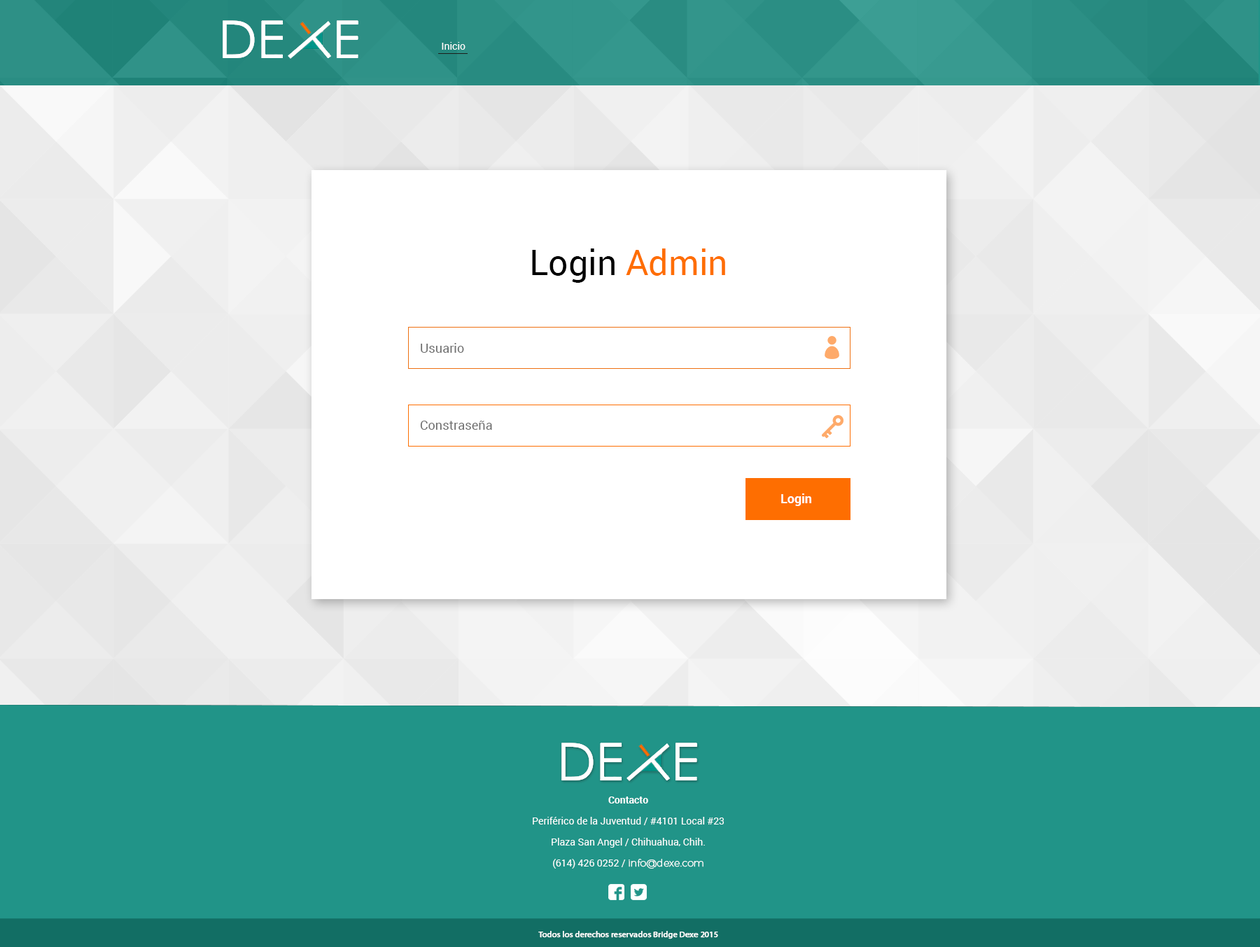
<style>
.page{position:relative;width:1260px;height:947px;background:#ffffff}
.page>*{position:absolute;margin:0}
.t1{font:9.8px "Roboto-Regular";color:#ffffff}
.t2{font:34.8px "Roboto-Regular";color:#000000}
.t3{font:34.8px "Roboto-Regular";color:#fe6e01}
.t4{font:12.6px "Roboto-Regular";color:#707070}
.t5{font:12.4px "Roboto-Bold";color:#ffffff}
.t6{font:9.8px/21px "Roboto-Regular";color:#ffffff}
.t7{font:9.8px/21px "Roboto-Bold";color:#ffffff}
.t8{font:9.8px/21px "Montserrat-Hairline";color:#ffffff;font-weight:bold}
.t9{font:8.4px "MyriadPro-Regular";color:#ffffff;font-weight:bold}
</style>
<div class="page">
<p class="t1" style="left:442px;top:42px;width:23px;height:8px">Inicio</p>
<p class="t2" style="left:532px;top:248px;width:193px;height:35px">Login <span class="t3">Admin</span></p>
<p class="t4" style="left:421px;top:343px;width:43px;height:10px">Usuario</p>
<p class="t4" style="left:420px;top:421px;width:72px;height:9px">Constraseña</p>
<p class="t5" style="left:781px;top:493px;width:30px;height:13px">Login</p>
<p class="t6" style="left:532px;top:796px;width:192px;height:72px;text-align:center"><span class="t7">Contacto<br></span>Periférico de la Juventud / #4101 Local #23<br>Plaza San Angel / Chihuahua, Chih.<br>(614) 426 0252 / <span class="t8">info@dexe.com</span></p>
<p class="t9" style="left:538px;top:931px;width:180px;height:8px">Todos los derechos reservados Bridge Dexe 2015</p>
</div>
